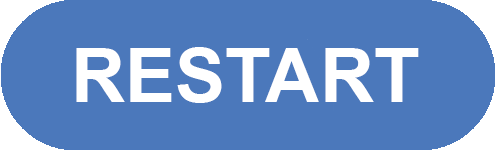
<style>
.page{position:relative;width:495px;height:150px;background:#4b78bb}
.page>*{position:absolute;margin:0}
.t1{font:75px "Arial-BoldMT";color:#ffffff}
</style>
<div class="page">
<p class="t1" style="left:76px;top:47px;width:343px;height:56px">RESTART</p>
</div>
